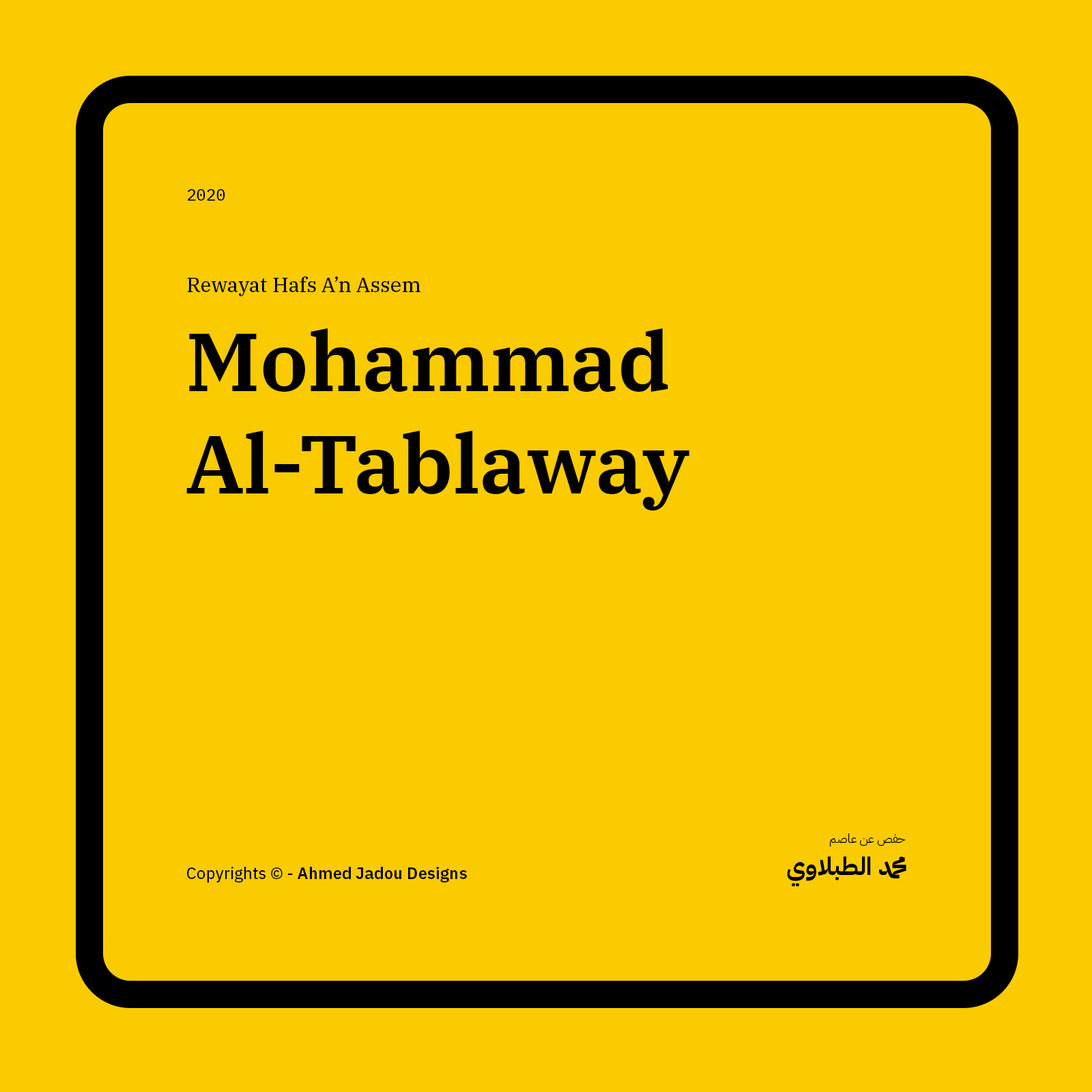
<style>
.page{position:relative;width:1092px;height:1092px;background:#facb00}
.page>*{position:absolute;margin:0}
.t1{font:16.4px "IBMPlexMono-Text";color:#000000}
.t2{font:20.5px "IBMPlexSerif-Text";color:#000000}
.t3{font:81.9px/102.7px "IBMPlexSerif-SemiBold";color:#000000}
.t4{font:12.3px "IBMPlexArabic-Light";color:#000000}
.t5{font:24.6px "IBMPlexArabic-Bold";color:#000000}
.t6{font:16.4px "IBMPlexSans-SemiBold";color:#000000}
.t7{font:16.4px "IBMPlexSans-Text";color:#000000}
</style>
<div class="page">
<p class="t1" style="left:188px;top:189px;width:37px;height:12px">2020</p>
<p class="t2" style="left:187px;top:276px;width:233px;height:20px">Rewayat Hafs A’n Assem</p>
<p class="t3" style="left:186px;top:328px;width:503px;height:183px">Mohammad Al-Tablaway</p>
<p class="t4" style="left:830px;top:833px;width:76px;height:14px">حفص عن عاصم</p>
<p class="t5" style="left:787px;top:857px;width:119px;height:30px">محمد الطبلاوي</p>
<p class="t6" style="left:187px;top:867px;width:280px;height:15px"><span class="t7">Copyrights © - </span>Ahmed Jadou Designs</p>
</div>
